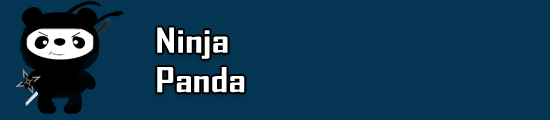
<style>
.page{position:relative;width:550px;height:120px;background:#043654}
.page>*{position:absolute;margin:0}
.t1{font:32.9px "AgencyFB-Bold";color:#ffffff;scale:1.33 1}
</style>
<div class="page">
<p class="t1" style="left:157px;top:27px;width:88px;height:66px">Ninja <br>Panda</p>
</div>
